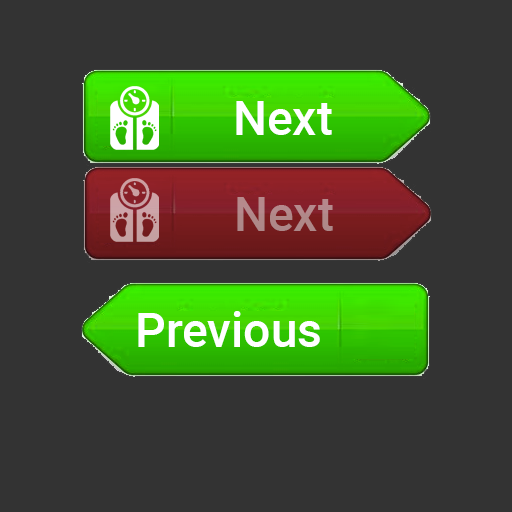
<style>
.page{position:relative;width:512px;height:512px;background:#333333}
.page>*{position:absolute;margin:0}
.t1{font:48px "Roboto-Medium";color:#ffffff}
.t2{font:48px "Roboto-Medium";color:#b08889}
</style>
<div class="page">
<p class="t1" style="left:236px;top:101px;width:96px;height:34px">Next</p>
<p class="t2" style="left:237px;top:197px;width:96px;height:34px">Next</p>
<p class="t1" style="left:138px;top:311px;width:182px;height:36px">Previous</p>
</div>
